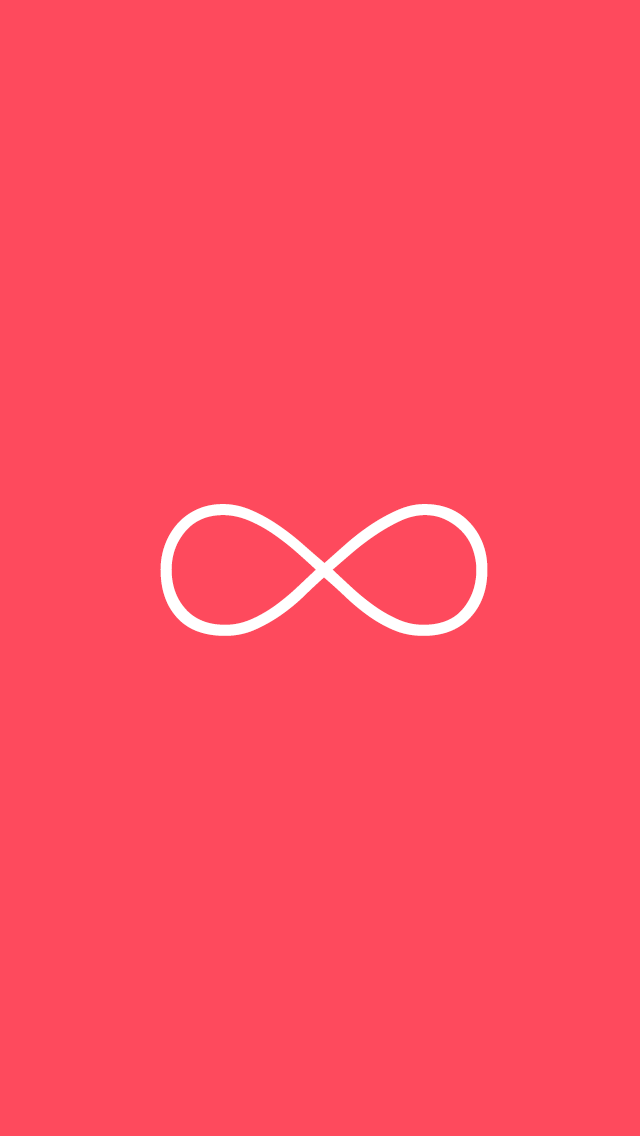
<style>
.page{position:relative;width:640px;height:1136px;background:#fe4a5d}
.page>*{position:absolute;margin:0}
.t1{font:531.9px "HelveticaNeue-UltraLight";color:#ffffff}
</style>
<div class="page">
<p class="t1" style="left:160px;top:504px;width:328px;height:132px">∞</p>
</div>
